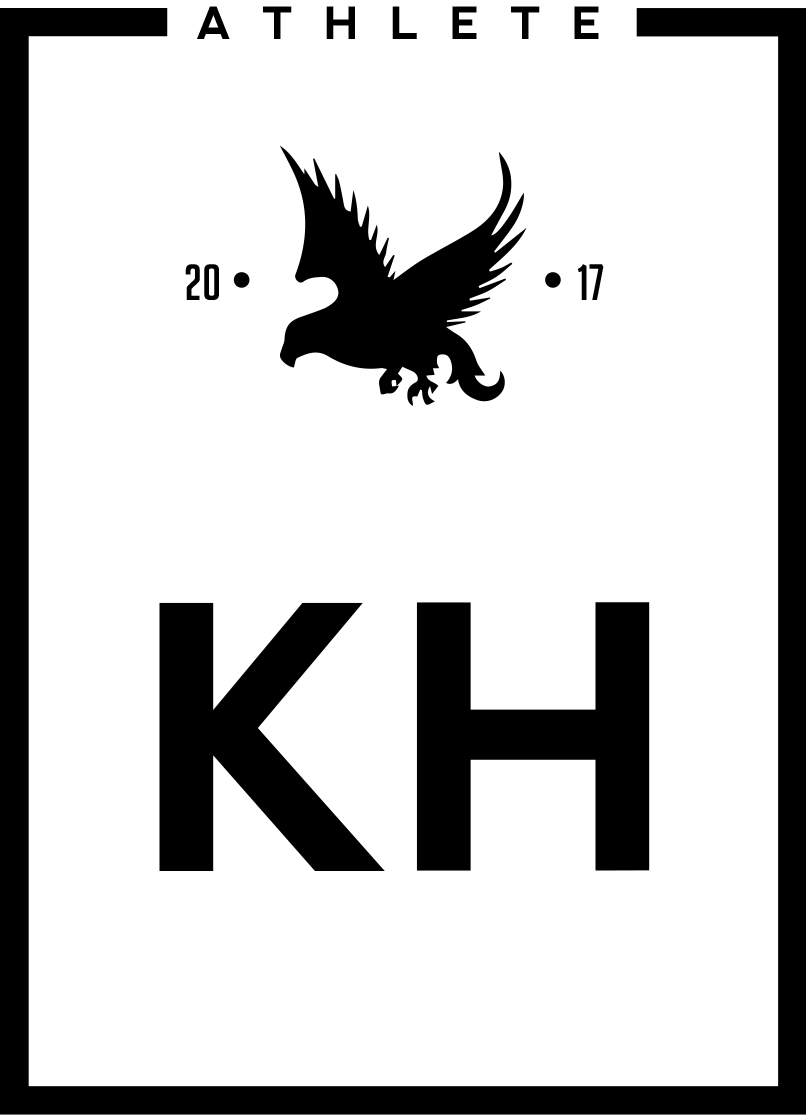
<style>
.page{position:relative;width:806px;height:1115px;background:#ffffff}
.page>*{position:absolute;margin:0}
.t1{font:44.6px "nevis-Bold";color:#000000}
.t2{font:49.9px "BigNoodleTitling";color:#000000}
.t3{font:365.8px "nevis-Bold";color:#000000}
</style>
<div class="page">
<p class="t1" style="left:197px;top:6px;width:402px;height:33px">A  T  H  L  E  T  E</p>
<p class="t2" style="left:185px;top:264px;width:34px;height:36px">20</p>
<p class="t2" style="left:577px;top:264px;width:27px;height:36px">17</p>
<p class="t3" style="left:159px;top:602px;width:491px;height:269px">KH</p>
</div>
